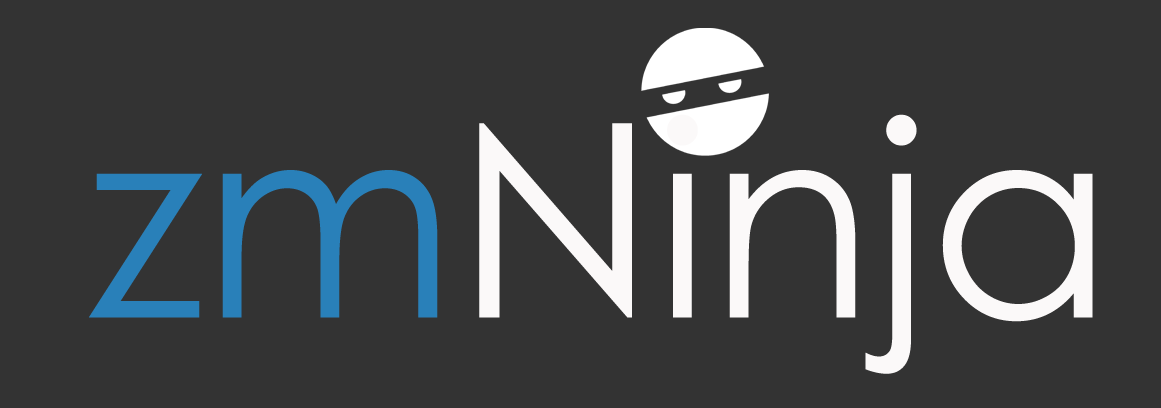
<style>
.page{position:relative;width:1161px;height:408px;background:#333333}
.page>*{position:absolute;margin:0}
.t1{font:270px "CenturyGothic";color:#fbf9f9}
.t2{font:270px "CenturyGothic";color:#2980b9}
</style>
<div class="page">
<p class="t1" style="left:89px;top:114px;width:1004px;height:260px"><span class="t2">zm</span>Ninja</p>
</div>
